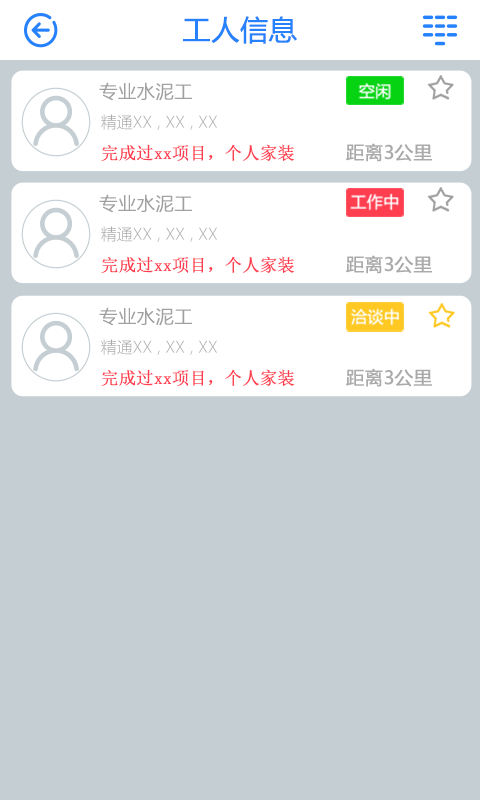
<style>
.page{position:relative;width:480px;height:800px;background:#c4ced3}
.page>*{position:absolute;margin:0}
.t1{font:28px "MicrosoftYaHei";color:#2681fc;font-weight:bold}
.t2{font:18.3px "MicrosoftYaHeiLight";color:#a0a0a0;font-weight:bold}
.t3{font:16px "MicrosoftYaHeiLight";color:#aaaaaa}
.t4{font:17.1px "SimSun";color:#ff3e50;font-weight:bold}
.t5{font:18.3px "MicrosoftYaHei";color:#aaaaaa;font-weight:bold}
</style>
<div class="page">
<p class="t1" style="left:183px;top:16px;width:114px;height:28px">工人信息</p>
<p class="t2" style="left:99px;top:82px;width:93px;height:19px">专业水泥工</p>
<p class="t3" style="left:101px;top:114px;width:116px;height:16px">精通XX , XX , XX</p>
<p class="t4" style="left:101px;top:144px;width:194px;height:17px">完成过xx项目，个人家装</p>
<p class="t5" style="left:346px;top:143px;width:86px;height:19px">距离3公里</p>
<p class="t2" style="left:99px;top:194px;width:93px;height:19px">专业水泥工</p>
<p class="t3" style="left:101px;top:226px;width:116px;height:16px">精通XX , XX , XX</p>
<p class="t4" style="left:101px;top:256px;width:194px;height:17px">完成过xx项目，个人家装</p>
<p class="t5" style="left:346px;top:255px;width:86px;height:19px">距离3公里</p>
<p class="t2" style="left:99px;top:307px;width:93px;height:19px">专业水泥工</p>
<p class="t3" style="left:101px;top:339px;width:116px;height:16px">精通XX , XX , XX</p>
<p class="t4" style="left:101px;top:369px;width:194px;height:17px">完成过xx项目，个人家装</p>
<p class="t5" style="left:346px;top:368px;width:86px;height:19px">距离3公里</p>
</div>
